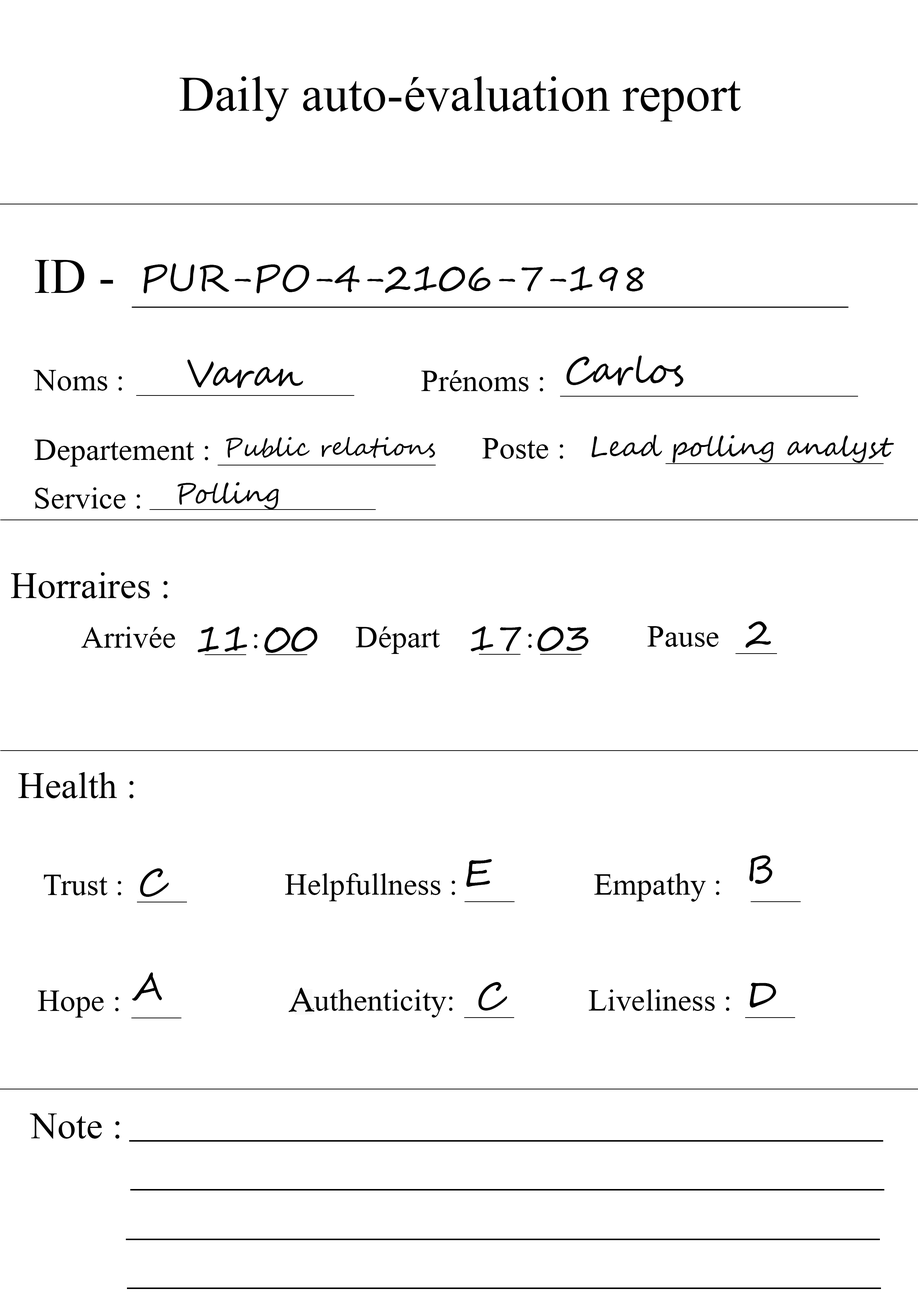
<style>
.page{position:relative;width:918px;height:1299px;background:#ffffff}
.page>*{position:absolute;margin:0}
.t1{font:74px "Microsoft-Himalaya";color:#000000}
.t2{font:37px "SegoeScript";color:#000000}
.t3{font:46.3px "Microsoft-Himalaya";color:#000000}
.t4{font:24.7px "SegoeScript";color:#000000}
.t5{font:27.8px "SegoeScript";color:#000000}
.t6{font:55.5px "Microsoft-Himalaya";color:#000000}
.t7{font:37px "HighTowerText-Reg";color:#000000}
</style>
<div class="page">
<p class="t1" style="left:180px;top:76px;width:561px;height:45px">Daily auto-évaluation report</p>
<p class="t1" style="left:35px;top:260px;width:78px;height:33px">ID -</p>
<p class="t2" style="left:143px;top:263px;width:502px;height:30px">PUR-PO-4-2106-7-198</p>
<p class="t2" style="left:187px;top:359px;width:116px;height:29px">Varan</p>
<p class="t2" style="left:566px;top:355px;width:118px;height:32px">Carlos</p>
<p class="t3" style="left:34px;top:370px;width:88px;height:21px">Noms :</p>
<p class="t3" style="left:421px;top:370px;width:122px;height:21px">Prénoms :</p>
<p class="t4" style="left:226px;top:437px;width:209px;height:21px">Public relations</p>
<p class="t3" style="left:482px;top:438px;width:81px;height:21px">Poste :</p>
<p class="t5" style="left:592px;top:435px;width:302px;height:28px">Lead polling analyst</p>
<p class="t3" style="left:34px;top:439px;width:174px;height:27px">Departement :</p>
<p class="t5" style="left:177px;top:482px;width:102px;height:27px">Polling</p>
<p class="t3" style="left:35px;top:487px;width:105px;height:22px">Service :</p>
<p class="t6" style="left:11px;top:572px;width:157px;height:26px">Horraires :</p>
<p class="t3" style="left:81px;top:626px;width:94px;height:22px">Arrivée</p>
<p class="t2" style="left:198px;top:626px;width:120px;height:27px">11 00</p>
<p class="t3" style="left:356px;top:626px;width:84px;height:28px">Départ</p>
<p class="t2" style="left:471px;top:626px;width:118px;height:25px">17 03</p>
<p class="t3" style="left:648px;top:626px;width:71px;height:21px">Pause</p>
<p class="t2" style="left:746px;top:621px;width:25px;height:27px">2</p>
<p class="t3" style="left:254px;top:634px;width:4px;height:14px">:</p>
<p class="t3" style="left:528px;top:633px;width:4px;height:15px">:</p>
<p class="t6" style="left:18px;top:772px;width:116px;height:26px">Health :</p>
<p class="t2" style="left:749px;top:855px;width:24px;height:29px">B</p>
<p class="t2" style="left:140px;top:868px;width:29px;height:29px">C</p>
<p class="t2" style="left:466px;top:859px;width:26px;height:28px">E</p>
<p class="t3" style="left:44px;top:874px;width:77px;height:21px">Trust :</p>
<p class="t3" style="left:285px;top:873px;width:170px;height:28px">Helpfullness :</p>
<p class="t3" style="left:594px;top:873px;width:126px;height:28px">Empathy :</p>
<p class="t2" style="left:132px;top:972px;width:30px;height:29px">A</p>
<p class="t7" style="left:288px;top:987px;width:27px;height:25px">A</p>
<p class="t3" style="left:301px;top:989px;width:152px;height:28px">authenticity:</p>
<p class="t2" style="left:478px;top:982px;width:29px;height:28px">C</p>
<p class="t3" style="left:589px;top:989px;width:141px;height:22px">Liveliness :</p>
<p class="t2" style="left:750px;top:983px;width:26px;height:24px">D</p>
<p class="t3" style="left:38px;top:990px;width:81px;height:27px">Hope :</p>
<p class="t6" style="left:30px;top:1113px;width:90px;height:25px">Note :</p>
</div>
